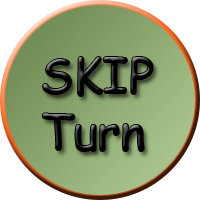
<style>
.page{position:relative;width:200px;height:200px;background:#ffffff}
.page>*{position:absolute;margin:0}
.t1{font:47.8px "ComicSansMS"}
</style>
<div class="page">
<p class="t1" style="left:42px;top:57px;width:111px;height:94px">SKIP<br>Turn</p>
</div>
